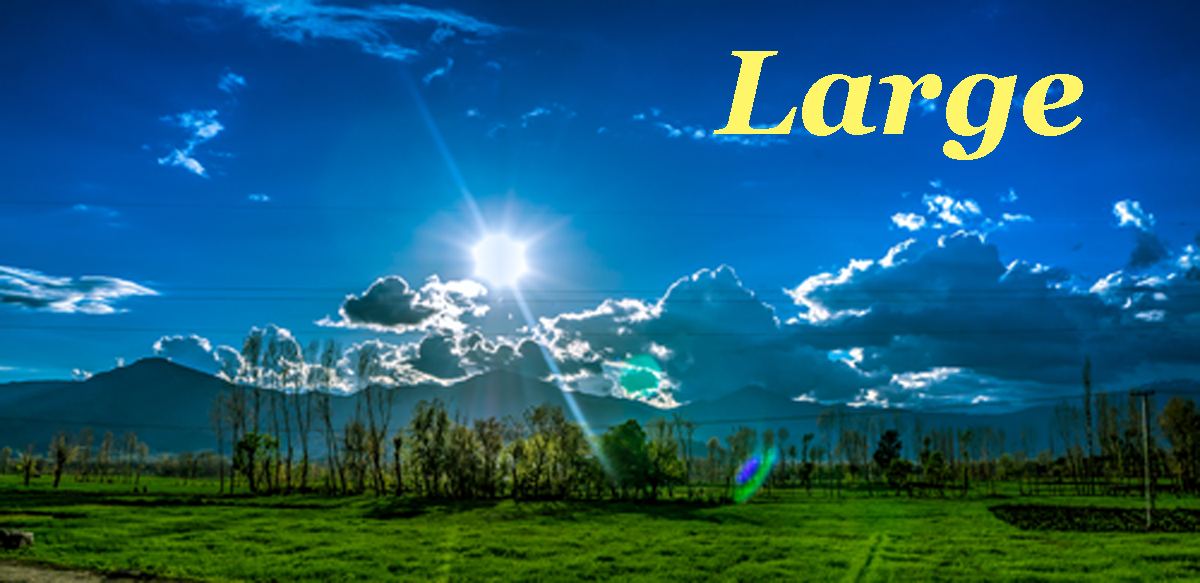
<style>
.page{position:relative;width:1200px;height:583px}
.page>*{position:absolute;margin:0}
.t1{font:120px "Georgia-BoldItalic";color:#fff568}
</style>
<div class="page">
<p class="t1" style="left:713px;top:51px;width:370px;height:109px">Large</p>
</div>
